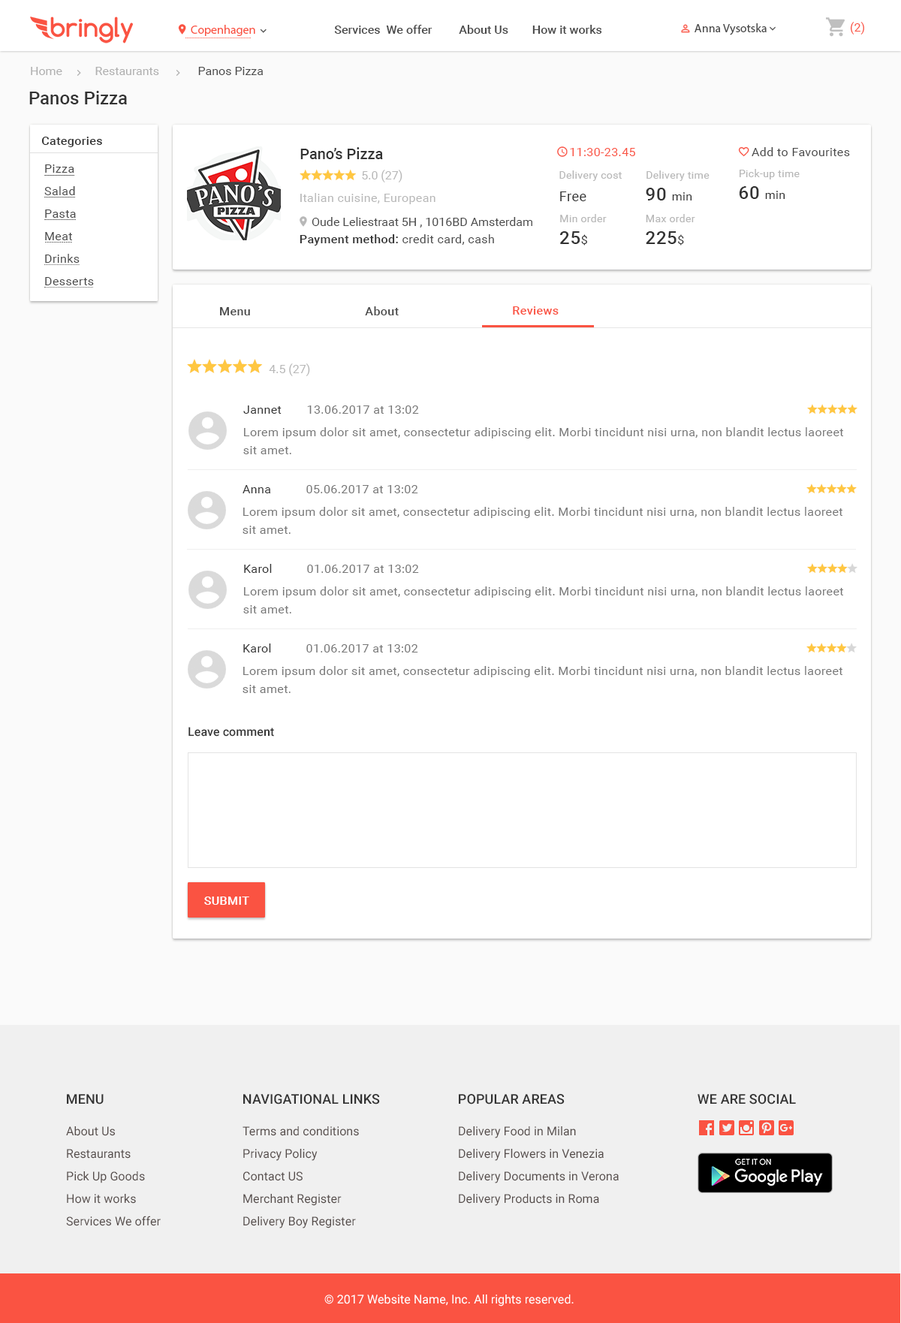
<style>
.page{position:relative;width:901px;height:1323px;background:#ffffff}
.page>*{position:absolute;margin:0}
.t1{font:12px "MyriadPro-Regular";color:#fa5342}
.t2{font:12px "Roboto-Medium";color:#4a4a4a}
.t3{font:12px "MyriadPro-Regular";color:#4a4a4a}
.t4{font:12px "Roboto-Regular";color:#fa5342}
.t5{font:12px "Roboto-Regular";color:#b0b0b0}
.t6{font:12px "Roboto-Regular";color:#4a4a4a}
.t7{font:18px "Roboto-Medium";color:#333333}
.t8{font:12px "Roboto-Medium";letter-spacing:0.025em;color:#333333}
.t9{font:15px "Roboto-Medium";color:#333333}
.t10{font:12px "Roboto-Regular";letter-spacing:0.025em;color:#fa5342}
.t11{font:12px "Roboto-Regular";letter-spacing:0.025em;color:#4a4a4a}
.t12{font:12px/22.5px "Roboto-Regular";letter-spacing:0.025em;color:#4a4a4a}
.t13{font:12px "Roboto-Regular";color:#b8b8b8}
.t14{font:10.5px "Roboto-Regular";letter-spacing:0.025em;color:#b8b8b8}
.t15{font:12px "Roboto-Regular";letter-spacing:0.025em;color:#b8b8b8}
.t16{font:13.5px "Roboto-Regular";letter-spacing:0.025em;color:#333333}
.t17{font:12px "Roboto-Regular";letter-spacing:0.025em;color:#333333}
.t18{font:18px "Roboto-Medium";letter-spacing:0.025em;color:#333333}
.t19{font:12px "Roboto-Medium";letter-spacing:0.025em;color:#4a4a4a}
.t20{font:12px "Roboto-Medium";letter-spacing:0.025em;color:#fa5342}
.t21{font:12px "Roboto-Regular";letter-spacing:0.025em;color:#777777}
.t22{font:12px/18px "Roboto-Regular";letter-spacing:0.025em;color:#777777}
.t23{font:12px "Roboto-Medium";letter-spacing:0.005em;color:#333333}
.t24{font:12px "Roboto-Medium";letter-spacing:0.025em;color:#fefefe;text-transform:uppercase}
.t25{font:13.5px "Roboto-Medium";letter-spacing:0.005em;color:#333333}
.t26{font:13.5px "Roboto-Medium";letter-spacing:0.005em;color:#333333;text-transform:uppercase}
.t27{font:12px/22.5px "Roboto-Regular";letter-spacing:0.005em;color:#554c4a}
.t28{font:12px "Roboto-Regular";letter-spacing:0.005em;color:#ffffff}
</style>
<div class="page">
<p class="t1" style="left:191px;top:25px;width:64px;height:11px">Copenhagen</p>
<p class="t2" style="left:334px;top:25px;width:268px;height:9px">Services  We offer         About Us        How it works</p>
<p class="t3" style="left:695px;top:23px;width:72px;height:12px">Anna Vysotska</p>
<p class="t4" style="left:850px;top:22px;width:14px;height:13px">(2)</p>
<p class="t5" style="left:31px;top:67px;width:233px;height:8px">Home           Restaurants <span class="t6">            Panos Pizza</span></p>
<p class="t7" style="left:29px;top:91px;width:98px;height:13px">Panos Pizza</p>
<p class="t8" style="left:41px;top:137px;width:61px;height:10px">Categories</p>
<p class="t9" style="left:300px;top:147px;width:83px;height:12px">Pano’s Pizza</p>
<p class="t10" style="left:570px;top:148px;width:65px;height:8px">11:30-23.45</p>
<p class="t11" style="left:752px;top:147px;width:98px;height:9px">Add to Favourites</p>
<p class="t12" style="left:44px;top:164px;width:50px;height:121px">Pizza<br>Salad<br>Pasta<br>Meat<br>Drinks<br>Desserts</p>
<p class="t13" style="left:362px;top:170px;width:41px;height:12px">5.0 (27)</p>
<p class="t14" style="left:559px;top:170px;width:63px;height:11px">Delivery cost</p>
<p class="t14" style="left:647px;top:170px;width:63px;height:11px">Delivery time</p>
<p class="t14" style="left:740px;top:169px;width:60px;height:10px">Pick-up time</p>
<p class="t15" style="left:300px;top:193px;width:136px;height:11px">Italian cuisine, European</p>
<p class="t16" style="left:560px;top:191px;width:27px;height:10px">Free</p>
<p class="t17" style="left:646px;top:188px;width:46px;height:13px"><span class="t18">90 </span>min</p>
<p class="t17" style="left:739px;top:186px;width:47px;height:13px"><span class="t18">60 </span>min</p>
<p class="t6" style="left:312px;top:217px;width:220px;height:11px">Oude Leliestraat 5H , 1016BD Amsterdam</p>
<p class="t14" style="left:560px;top:214px;width:47px;height:8px">Min order</p>
<p class="t14" style="left:646px;top:214px;width:49px;height:8px">Max order</p>
<p class="t18" style="left:560px;top:231px;width:27px;height:15px">25<span class="t17">$</span></p>
<p class="t18" style="left:646px;top:231px;width:38px;height:15px">225<span class="t17">$</span></p>
<p class="t11" style="left:300px;top:234px;width:194px;height:12px"><span class="t8">Payment method:</span> credit card, cash</p>
<p class="t19" style="left:220px;top:307px;width:30px;height:8px">Menu</p>
<p class="t19" style="left:365px;top:306px;width:34px;height:9px">About</p>
<p class="t20" style="left:513px;top:306px;width:46px;height:9px">Reviews</p>
<p class="t13" style="left:269px;top:363px;width:41px;height:13px">4.5 (27)</p>
<p class="t17" style="left:243px;top:406px;width:39px;height:8px">Jannet</p>
<p class="t21" style="left:307px;top:406px;width:112px;height:8px">13.06.2017 at 13:02</p>
<p class="t22" style="left:243px;top:427px;width:600px;height:27px">Lorem ipsum dolor sit amet, consectetur adipiscing elit. Morbi tincidunt nisi urna, non blandit lectus laoreet sit amet.</p>
<p class="t17" style="left:243px;top:485px;width:28px;height:8px">Anna</p>
<p class="t21" style="left:306px;top:485px;width:112px;height:8px">05.06.2017 at 13:02</p>
<p class="t22" style="left:243px;top:507px;width:600px;height:27px">Lorem ipsum dolor sit amet, consectetur adipiscing elit. Morbi tincidunt nisi urna, non blandit lectus laoreet sit amet.</p>
<p class="t17" style="left:244px;top:564px;width:28px;height:9px">Karol</p>
<p class="t21" style="left:307px;top:565px;width:112px;height:8px">01.06.2017 at 13:02</p>
<p class="t22" style="left:243px;top:587px;width:600px;height:27px">Lorem ipsum dolor sit amet, consectetur adipiscing elit. Morbi tincidunt nisi urna, non blandit lectus laoreet sit amet.</p>
<p class="t17" style="left:243px;top:644px;width:28px;height:9px">Karol</p>
<p class="t21" style="left:306px;top:644px;width:112px;height:9px">01.06.2017 at 13:02</p>
<p class="t22" style="left:243px;top:666px;width:600px;height:27px">Lorem ipsum dolor sit amet, consectetur adipiscing elit. Morbi tincidunt nisi urna, non blandit lectus laoreet sit amet.</p>
<p class="t23" style="left:188px;top:727px;width:86px;height:10px">Leave comment</p>
<p class="t24" style="left:204px;top:897px;width:45px;height:8px">SUBMIT</p>
<p class="t25" style="left:67px;top:1094px;width:37px;height:11px">MENU</p>
<p class="t26" style="left:243px;top:1094px;width:137px;height:11px">Navigational Links</p>
<p class="t26" style="left:459px;top:1094px;width:106px;height:11px">Popular Areas</p>
<p class="t26" style="left:698px;top:1094px;width:98px;height:11px">We are social</p>
<p class="t27" style="left:66px;top:1126px;width:95px;height:100px">About Us<br>Restaurants<br>Pick Up Goods <br>How it works <br>Services We offer</p>
<p class="t27" style="left:243px;top:1126px;width:116px;height:103px">Terms and conditions<br>Privacy Policy<br>Contact US <br>Merchant Register <br>Delivery Boy Register</p>
<p class="t27" style="left:459px;top:1126px;width:160px;height:80px">Delivery Food in Milan<br>Delivery Flowers in Venezia<br>Delivery Documents in Verona<br>Delivery Products in Roma</p>
<p class="t28" style="left:324px;top:1295px;width:250px;height:12px">© 2017 Website Name, Inc. All rights reserved.</p>
</div>
